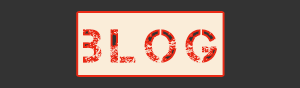
<style>
.page{position:relative;width:300px;height:88px;background:#333333}
.page>*{position:absolute;margin:0}
.t1{font:60px "TakeCover";color:#faedd9}
</style>
<div class="page">
<p class="t1" style="left:78px;top:13px;width:145px;height:62px">blog</p>
</div>
